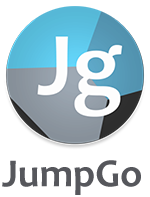
<style>
.page{position:relative;width:150px;height:197px;background:#ffffff}
.page>*{position:absolute;margin:0}
.t1{font:40px "Candara-Bold";color:#56575c}
</style>
<div class="page">
<p class="t1" style="left:2px;top:160px;width:139px;height:35px">JumpGo</p>
</div>
